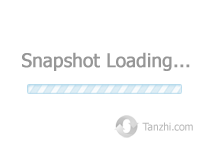
<style>
.page{position:relative;width:200px;height:150px;background:#ffffff}
.page>*{position:absolute;margin:0}
.t1{font:18.7px "Tahoma";letter-spacing:-0.01em;color:#969696;font-weight:bold}
.t2{font:10.4px "Tahoma";letter-spacing:-0.01em;color:#b9b9b9}
</style>
<div class="page">
<p class="t1" style="left:22px;top:52px;width:168px;height:19px">Snapshot Loading...</p>
<p class="t2" style="left:142px;top:122px;width:51px;height:9px">Tanzhi.com</p>
</div>
